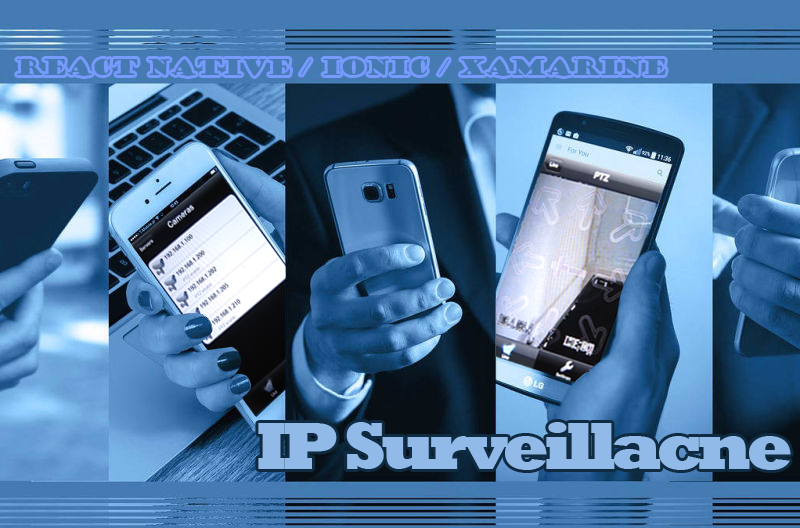
<style>
.page{position:relative;width:800px;height:528px}
.page>*{position:absolute;margin:0}
.t1{font:21.4px "GoudyStout";letter-spacing:-0.08em;color:#467ab3}
.t2{font:67.9px "Rockwell-ExtraBold";letter-spacing:-0.08em;color:#91bae8}
</style>
<div class="page">
<p class="t1" style="left:17px;top:59px;width:649px;height:17px">React Native / Ionic / Xamarine</p>
<p class="t2" style="left:258px;top:422px;width:533px;height:48px">IP Surveillacne</p>
</div>
